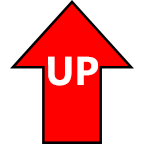
<style>
.page{position:relative;width:144px;height:144px;background:#ffffff}
.page>*{position:absolute;margin:0}
.t1{font:40.2px "MicrosoftPhagsPa-Bold";color:#ffffff}
</style>
<div class="page">
<p class="t1" style="left:48px;top:56px;width:50px;height:30px">UP</p>
</div>
